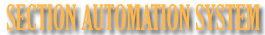
<style>
.page{position:relative;width:265px;height:35px;background:#ffb749}
.page>*{position:absolute;margin:0}
.t1{font:33.1px "GloucesterMT-ExtraCondensed";color:#ffb749;scale:0.8 1}
</style>
<div class="page">
<p class="t1" style="left:6px;top:4px;width:254px;height:27px">SECTION AUTOMATION SYSTEM</p>
</div>
